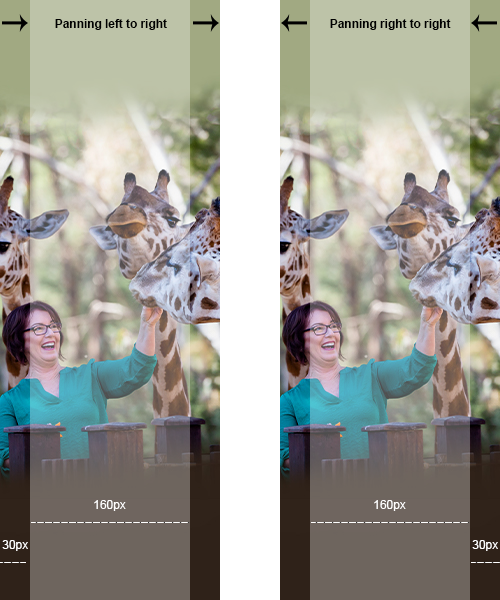
<style>
.page{position:relative;width:500px;height:600px}
.page>*{position:absolute;margin:0}
.t1{font:12px "Arial-BoldMT";letter-spacing:-0.005em;color:#000000}
.t2{font:12px "ArialMT";letter-spacing:-0.005em;color:#ffffff}
</style>
<div class="page">
<p class="t1" style="left:55px;top:19px;width:112px;height:11px">Panning left to right</p>
<p class="t1" style="left:330px;top:19px;width:121px;height:11px">Panning right to right</p>
<p class="t2" style="left:94px;top:500px;width:32px;height:11px">160px</p>
<p class="t2" style="left:374px;top:500px;width:32px;height:11px">160px</p>
<p class="t2" style="left:2px;top:540px;width:26px;height:11px">30px</p>
<p class="t2" style="left:472px;top:540px;width:26px;height:11px">30px</p>
</div>
